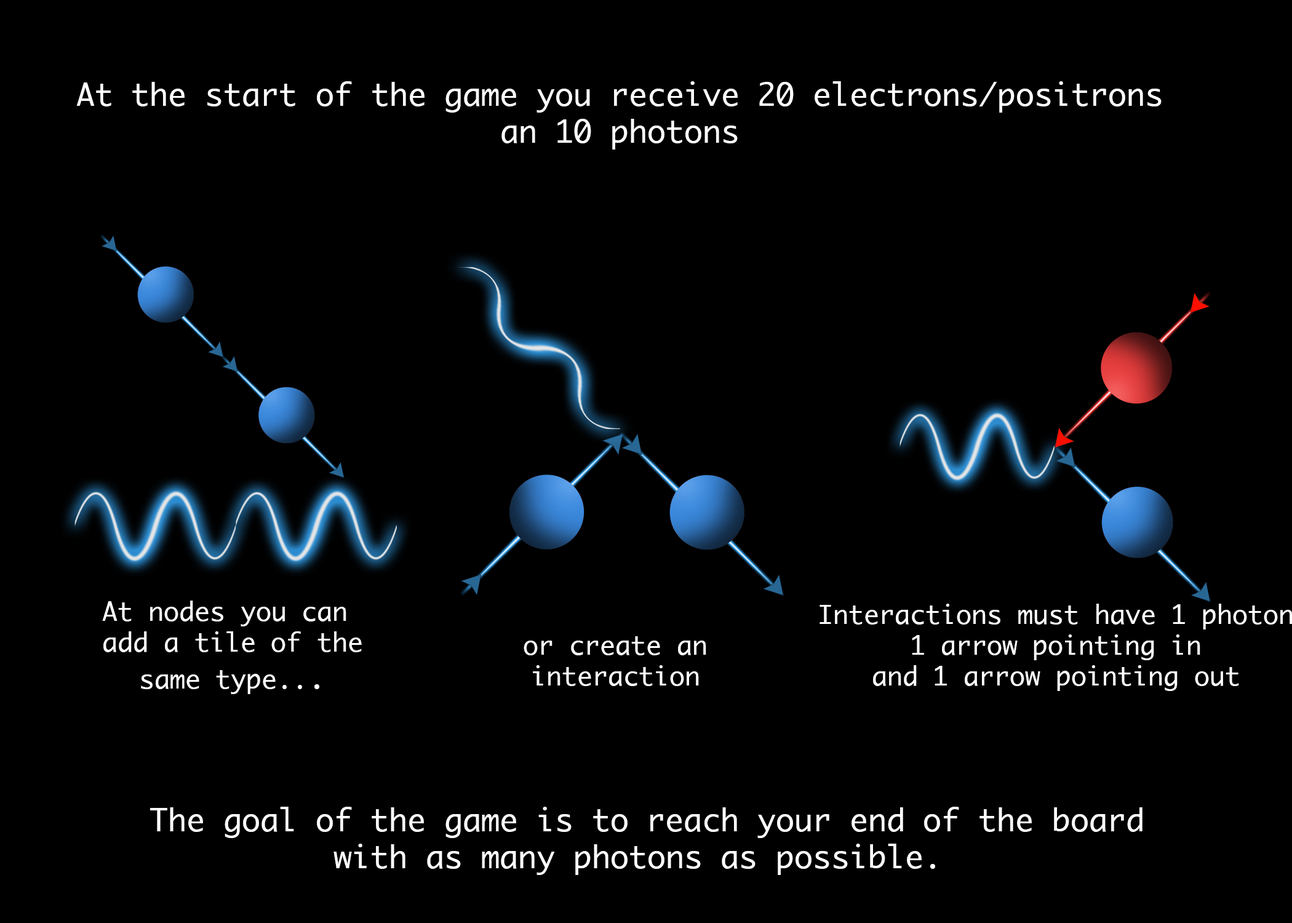
<style>
.page{position:relative;width:1292px;height:923px;background:#000000}
.page>*{position:absolute;margin:0}
.t1{font:30.8px "Ayuthaya";color:#ffffff}
.t2{font:25.6px "Ayuthaya";color:#ffffff}
</style>
<div class="page">
<p class="t1" style="left:76px;top:81px;width:1086px;height:69px;text-align:center">At the start of the game you receive 20 electrons/positrons<br>an 10 photons</p>
<p class="t2" style="left:102px;top:600px;width:260px;height:94px;text-align:center">At nodes you can <br>add a tile of the<br>same type..<span class="t1">.</span></p>
<p class="t2" style="left:820px;top:604px;width:473px;height:87px;text-align:center">Interactions must have 1 photon<br>1 arrow pointing in<br>and 1 arrow pointing out</p>
<p class="t2" style="left:524px;top:636px;width:182px;height:50px;text-align:center">or create an<br>interaction</p>
<p class="t1" style="left:150px;top:807px;width:993px;height:68px;text-align:center">The goal of the game is to reach your end of the board<br>with as many photons as possible.</p>
</div>
